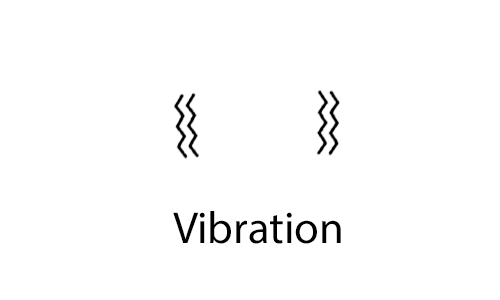
<style>
.page{position:relative;width:500px;height:300px;background:#ffffff}
.page>*{position:absolute;margin:0}
.t1{font:45px "MyriadPro-Regular";color:#010101}
</style>
<div class="page">
<p class="t1" style="left:173px;top:211px;width:168px;height:33px">Vibration</p>
</div>
